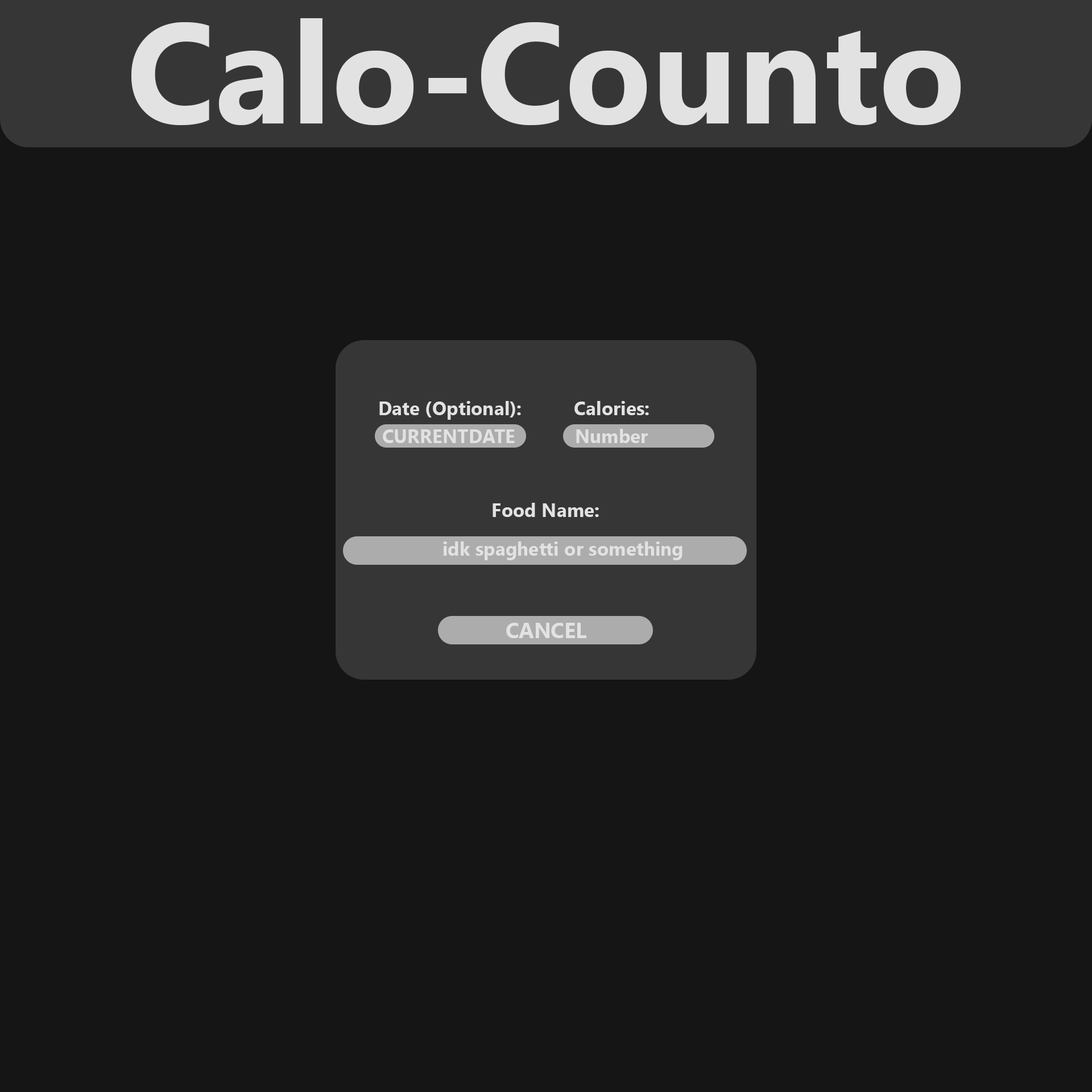
<style>
.page{position:relative;width:1092px;height:1092px;background:#151515}
.page>*{position:absolute;margin:0}
.t1{font:142.2px "SegoeUI-Bold";color:#e2e2e2}
.t2{font:19px "SegoeUI-Bold";color:#e2e2e2}
.t3{font:21.3px "SegoeUI-Bold";color:#e2e2e2}
</style>
<div class="page">
<p class="t1" style="left:131px;top:18px;width:830px;height:107px">Calo-Counto</p>
<p class="t2" style="left:379px;top:401px;width:142px;height:19px">Date (Optional):</p>
<p class="t2" style="left:574px;top:401px;width:75px;height:14px">Calories:</p>
<p class="t2" style="left:383px;top:429px;width:132px;height:14px">CURRENTDATE</p>
<p class="t2" style="left:576px;top:429px;width:72px;height:14px">Number</p>
<p class="t2" style="left:493px;top:503px;width:106px;height:14px">Food Name:</p>
<p class="t2" style="left:443px;top:541px;width:239px;height:19px">idk spaghetti or something</p>
<p class="t3" style="left:506px;top:623px;width:80px;height:15px">CANCEL</p>
</div>
